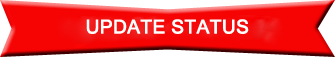
<style>
.page{position:relative;width:335px;height:57px;background:#f60303}
.page>*{position:absolute;margin:0}
.t1{font:19px "MicrosoftSansSerif";color:#ffffff;font-weight:bold}
</style>
<div class="page">
<p class="t1" style="left:86px;top:19px;width:163px;height:15px">UPDATE STATUS</p>
</div>
